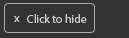
<style>
.page{position:relative;width:129px;height:38px;background:#333333}
.page>*{position:absolute;margin:0}
.t1{font:12px "MyriadPro-Regular";color:#cccccc}
.t2{font:11.6px "MyriadPro-Regular";color:#cccccc}
</style>
<div class="page">
<p class="t1" style="left:14px;top:16px;width:6px;height:6px">x</p>
<p class="t2" style="left:27px;top:14px;width:60px;height:9px">Click to hide</p>
</div>
